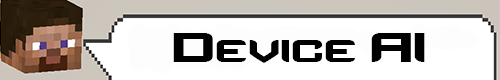
<style>
.page{position:relative;width:500px;height:80px;background:#ffffff}
.page>*{position:absolute;margin:0}
.t1{font:58.3px "Counter-StrikeRegular";color:#000000}
</style>
<div class="page">
<p class="t1" style="left:173px;top:33px;width:252px;height:30px">Device AI</p>
</div>
